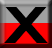
<style>
.page{position:relative;width:52px;height:48px;background:#000000}
.page>*{position:absolute;margin:0}
.t1{font:49.9px "Arial-BoldMT";color:#000000;scale:1.32 1}
</style>
<div class="page">
<p class="t1" style="left:4px;top:7px;width:44px;height:36px">X</p>
</div>
